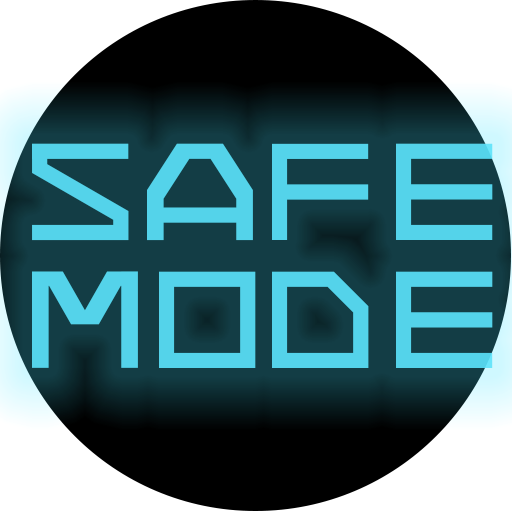
<style>
.page{position:relative;width:512px;height:512px;background:#133d45}
.page>*{position:absolute;margin:0}
.t1{font:110px/128px "7THDR2020Regular";letter-spacing:0.04em;color:#5ae2fa;text-transform:uppercase}
.t2{font:110px/128px "7THDR2020Regular";letter-spacing:0.02em;color:#5ae2fa;text-transform:uppercase;scale:1.1 1}
.t3{font:110px/128px "7THDR2020Regular";letter-spacing:0.12em;color:#5ae2fa;text-transform:uppercase}
.t4{font:110px/128px "7THDR2020Regular";letter-spacing:0.08em;color:#5ae2fa;text-transform:uppercase}
.t5{font:110px/128px "7THDR2020Regular";letter-spacing:0.04em;color:#5ae2fa;text-transform:uppercase;scale:1.1 1}
.t6{font:110px/128px "7THDR2020Regular";letter-spacing:0.02em;color:#5ae2fa;text-transform:uppercase}
</style>
<div class="page">
<p class="t1" style="left:32px;top:143px;width:461px;height:225px;opacity:0.9">S<span class="t2">A</span><span class="t3">F</span><span class="t4">E<br></span><span class="t5">M</span><span class="t6">O</span><span class="t3">D</span><span class="t4">E</span></p>
</div>
